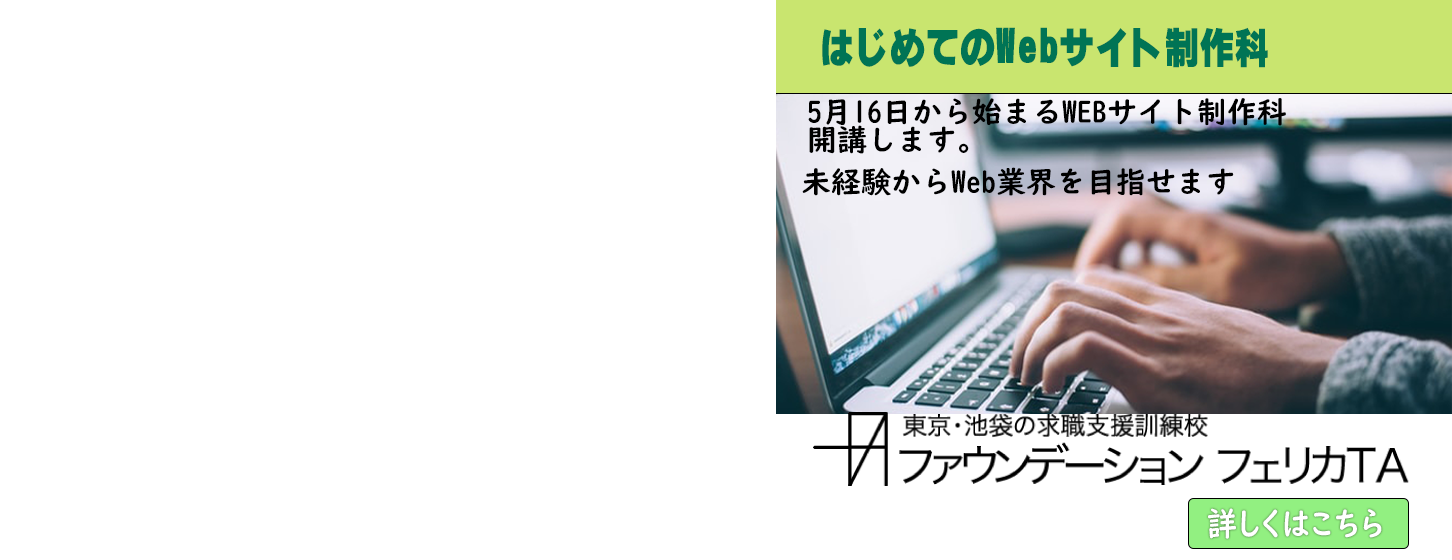
<style>
.page{position:relative;width:1452px;height:560px;background:#ffffff}
.page>*{position:absolute;margin:0}
.t1{font:40.8px "TA_kakugo_gf_01";color:#007455;scale:0.86 1}
.t2{font:48.9px "TA_kakugo_gf_01";color:#007455;scale:0.86 1}
.t3{font:30px/28px "UDDigiKyokashoN-B";color:#000000}
.t4{font:30px "UDDigiKyokashoN-B";color:#000000}
.t5{font:33px "UDDigiKyokashoNK-B";color:#ffffff;scale:0.91 1}
</style>
<div class="page">
<p class="t1" style="left:822px;top:27px;width:446px;height:41px">はじめての<span class="t2">Web</span>サイト制作科</p>
<p class="t3" style="left:808px;top:98px;width:478px;height:56px">5月16日から始まるWEBサイト制作科<br>開講します。</p>
<p class="t4" style="left:802px;top:167px;width:432px;height:29px">未経験からWeb業界を目指せます</p>
<p class="t5" style="left:1208px;top:508px;width:174px;height:31px">詳しくはこちら</p>
</div>
